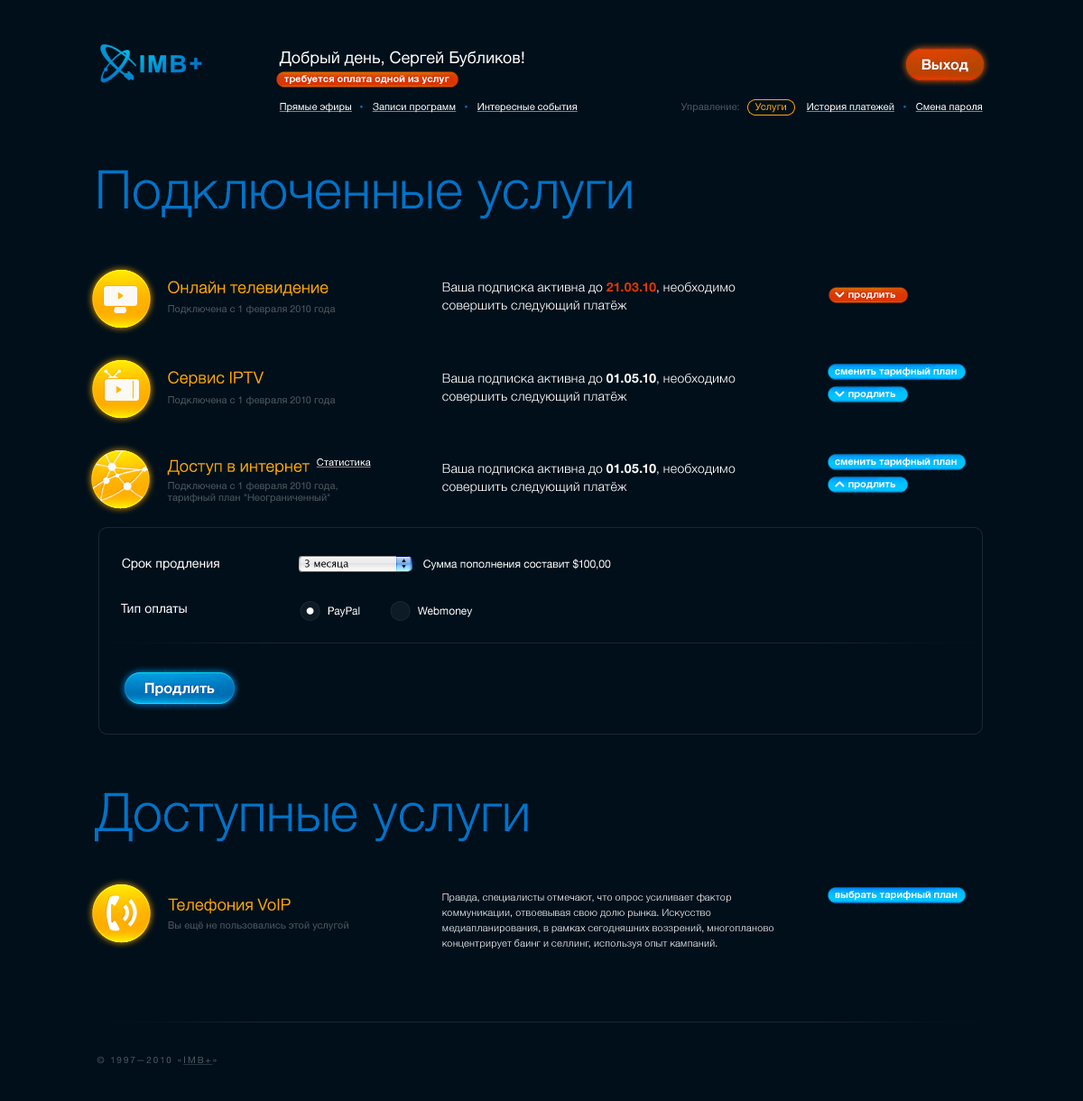
<style>
.page{position:relative;width:1083px;height:1101px;background:#000f1a}
.page>*{position:absolute;margin:0}
.t1{font:16.2px "HelveticaNeue";color:#ffffff}
.t2{font:14.4px "HelveticaNeue-Bold";color:#ffffff}
.t3{font:9.9px "HelveticaNeue-Bold";color:#ffffff}
.t4{font:9.9px "HelveticaNeue";color:#ffffff;text-decoration:underline}
.t5{font:9.9px "HelveticaNeue";color:#4d575f}
.t6{font:9.9px "HelveticaNeue";color:#ffa800}
.t7{font:53.2px "HelveticaNeue-Light";color:#0073c9}
.t8{font:16.2px "HelveticaNeue-Light";color:#ffa800}
.t9{font:12.6px/18px "HelveticaNeue-Light";color:#ffffff}
.t10{font:12.6px/18px "HelveticaNeue-Bold";color:#dc3700}
.t11{font:12.6px/18px "HelveticaNeue-Bold";color:#ffffff}
.t12{font:12.6px "HelveticaNeue";color:#ffffff}
.t13{font:9.9px "LucidaGrande";color:#000000}
.t14{font:10.8px "HelveticaNeue";color:#ffffff}
.t15{font:9.9px/15.3px "HelveticaNeue-Light";color:#ffffff}
.t16{font:9px "HelveticaNeue";letter-spacing:0.2em;color:#4d575f;text-transform:uppercase}
.t17{font:9px "HelveticaNeue";letter-spacing:0.2em;color:#4d575f;text-transform:uppercase;text-decoration:underline}
</style>
<div class="page">
<p class="t1" style="left:279px;top:51px;width:245px;height:16px">Добрый день, Сергей Бубликов!</p>
<p class="t2" style="left:921px;top:59px;width:47px;height:13px">Выход</p>
<p class="t3" style="left:284px;top:75px;width:165px;height:9px">требуется оплата одной из услуг</p>
<p class="t4" style="left:279px;top:103px;width:73px;height:10px">Прямые эфиры</p>
<p class="t4" style="left:372px;top:103px;width:85px;height:10px">Записи программ</p>
<p class="t4" style="left:477px;top:103px;width:101px;height:10px">Интересные события</p>
<p class="t5" style="left:680px;top:103px;width:59px;height:10px">Управление:</p>
<p class="t6" style="left:754px;top:103px;width:32px;height:10px">Услуги</p>
<p class="t4" style="left:806px;top:103px;width:88px;height:10px">История платежей</p>
<p class="t4" style="left:915px;top:103px;width:68px;height:10px">Смена пароля</p>
<p class="t7" style="left:98px;top:170px;width:534px;height:49px">Подключенные услуги</p>
<p class="t8" style="left:168px;top:281px;width:161px;height:15px">Онлайн телевидение</p>
<p class="t9" style="left:442px;top:282px;width:294px;height:30px">Ваша подписка активна до <span class="t10">21.03.10</span>, необходимо<br>совершить следующий платёж</p>
<p class="t3" style="left:848px;top:292px;width:47px;height:8px">продлить</p>
<p class="t5" style="left:168px;top:305px;width:168px;height:10px">Подключена с 1 февраля 2010 года</p>
<p class="t8" style="left:168px;top:371px;width:96px;height:16px">Сервис IPTV</p>
<p class="t9" style="left:442px;top:373px;width:294px;height:30px">Ваша подписка активна до <span class="t11">01.05.10</span>, необходимо<br>совершить следующий платёж</p>
<p class="t3" style="left:835px;top:367px;width:122px;height:9px">cменить тарифный план</p>
<p class="t5" style="left:168px;top:396px;width:168px;height:10px">Подключена с 1 февраля 2010 года</p>
<p class="t3" style="left:848px;top:392px;width:47px;height:7px">продлить</p>
<p class="t8" style="left:167px;top:459px;width:143px;height:17px">Доступ в интернет</p>
<p class="t4" style="left:316px;top:458px;width:55px;height:9px">Статистика</p>
<p class="t3" style="left:835px;top:458px;width:122px;height:9px">cменить тарифный план</p>
<p class="t9" style="left:442px;top:463px;width:294px;height:31px">Ваша подписка активна до <span class="t11">01.05.10</span>, необходимо<br>совершить следующий платёж</p>
<p class="t5" style="left:167px;top:482px;width:171px;height:22px">Подключена с 1 февраля 2010 года,<br>тарифный план "Неограниченный"</p>
<p class="t3" style="left:848px;top:482px;width:47px;height:7px">продлить</p>
<p class="t12" style="left:122px;top:558px;width:97px;height:12px">Срок продления</p>
<p class="t13" style="left:305px;top:560px;width:43px;height:9px">3 месяца</p>
<p class="t14" style="left:423px;top:559px;width:188px;height:11px">Сумма пополнения составит $100,00</p>
<p class="t12" style="left:121px;top:604px;width:66px;height:10px">Тип оплаты</p>
<p class="t14" style="left:328px;top:606px;width:32px;height:11px">PayPal</p>
<p class="t14" style="left:418px;top:606px;width:55px;height:11px">Webmoney</p>
<p class="t2" style="left:144px;top:682px;width:71px;height:14px">Продлить</p>
<p class="t7" style="left:95px;top:792px;width:433px;height:50px">Доступные услуги</p>
<p class="t15" style="left:442px;top:893px;width:331px;height:56px">Правда, специалисты отмечают, что опрос усиливает фактор<br>коммуникации, отвоевывая свою долю рынка. Искусство<br>медиапланирования, в рамках сегодняшних воззрений, многопланово<br>концентрирует баинг и селлинг, используя опыт кампаний.</p>
<p class="t3" style="left:835px;top:891px;width:123px;height:9px">выбрать тарифный план</p>
<p class="t8" style="left:168px;top:898px;width:123px;height:16px">Телефония VoIP</p>
<p class="t5" style="left:168px;top:921px;width:180px;height:10px">Вы ещё не пользовались этой услугой</p>
<p class="t16" style="left:97px;top:1056px;width:120px;height:9px">© 1997—2010 «<span class="t17">IMB+</span>»</p>
</div>
